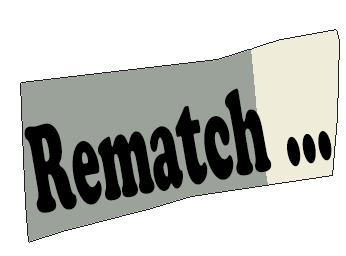
<style>
.page{position:relative;width:346px;height:256px;background:#ffffff}
.page>*{position:absolute;margin:0}
.t1{font:121.8px "CooperBlackStd";color:#000000;scale:0.41 1}
</style>
<div class="page">
<p class="t1" style="left:24px;top:88px;width:308px;height:125px;rotate:-11deg">Rematch ...</p>
</div>
